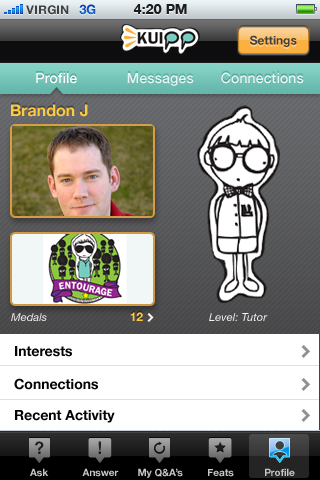
<style>
.page{position:relative;width:320px;height:480px;background:#ffffff}
.page>*{position:absolute;margin:0}
.t1{font:12px "HelveticaNeue-Bold";color:#404040;text-transform:uppercase}
.t2{font:13px "HelveticaNeue-Bold";color:#0c54c5;text-transform:uppercase}
.t3{font:14px "HelveticaNeue-Bold";color:#1a1b1b;text-transform:uppercase}
.t4{font:12px "HelveticaNeue-Bold";color:#404041}
.t5{font:14px "HelveticaNeue-Medium";letter-spacing:0.01em;color:#ffffff}
.t6{font:14px "HelveticaNeue-Medium";letter-spacing:0.01em;color:#e9f4f3}
.t7{font:16px "HelveticaNeue-Bold";color:#fcc940}
.t8{font:11px "HelveticaNeue-Italic";letter-spacing:0.01em;color:#f6f0f0}
.t9{font:12px "HelveticaNeue-Bold";color:#fcc940}
.t10{font:14px "HelveticaNeue-Bold";color:#040404}
.t11{font:10px "HelveticaNeue-Bold";color:#c6c6c5}
</style>
<div class="page">
<p class="t1" style="left:26px;top:5px;width:43px;height:10px">VIRGIN</p>
<p class="t2" style="left:79px;top:4px;width:17px;height:11px">3G</p>
<p class="t3" style="left:133px;top:4px;width:54px;height:10px">4:20 PM</p>
<p class="t4" style="left:250px;top:35px;width:47px;height:12px">Settings</p>
<p class="t5" style="left:36px;top:73px;width:41px;height:11px">Profile</p>
<p class="t6" style="left:127px;top:73px;width:67px;height:13px">Messages</p>
<p class="t6" style="left:221px;top:72px;width:83px;height:12px">Connections</p>
<p class="t7" style="left:11px;top:104px;width:77px;height:13px">Brandon J</p>
<p class="t8" style="left:11px;top:313px;width:36px;height:8px">Medals</p>
<p class="t9" style="left:130px;top:312px;width:13px;height:9px">12</p>
<p class="t8" style="left:209px;top:313px;width:59px;height:8px">Level: Tutor</p>
<p class="t10" style="left:15px;top:346px;width:57px;height:11px">Interests</p>
<p class="t10" style="left:14px;top:378px;width:84px;height:12px">Connections</p>
<p class="t10" style="left:15px;top:410px;width:100px;height:13px">Recent Activity</p>
<p class="t11" style="left:30px;top:468px;width:19px;height:9px">Ask</p>
<p class="t11" style="left:82px;top:468px;width:37px;height:9px">Answer</p>
<p class="t11" style="left:138px;top:468px;width:45px;height:10px">My Q&amp;A’s</p>
<p class="t11" style="left:208px;top:469px;width:26px;height:8px">Feats</p>
<p class="t11" style="left:265px;top:468px;width:30px;height:8px">Profile</p>
</div>
